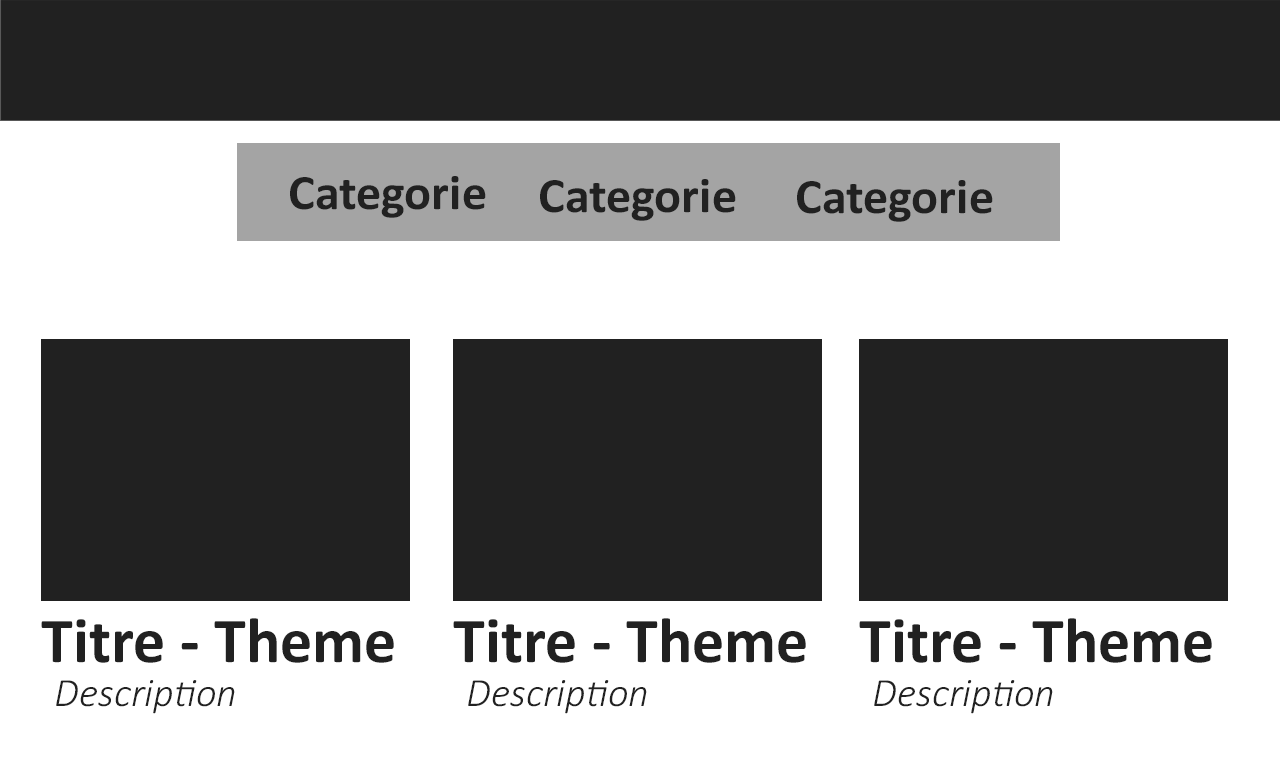
<style>
.page{position:relative;width:1280px;height:760px;background:#212121}
.page>*{position:absolute;margin:0}
.t1{font:49.8px "Calibri-Bold";color:#212121}
.t2{font:64.4px "Calibri-Bold";color:#212121}
.t3{font:40.6px "Calibri-LightItalic";color:#212121}
</style>
<div class="page">
<p class="t1" style="left:290px;top:176px;width:196px;height:42px">Categorie</p>
<p class="t1" style="left:540px;top:179px;width:196px;height:42px">Categorie</p>
<p class="t1" style="left:797px;top:180px;width:196px;height:42px">Categorie</p>
<p class="t2" style="left:41px;top:618px;width:353px;height:45px">Titre - Theme</p>
<p class="t2" style="left:453px;top:618px;width:353px;height:45px">Titre - Theme</p>
<p class="t2" style="left:859px;top:618px;width:353px;height:45px">Titre - Theme</p>
<p class="t3" style="left:56px;top:680px;width:179px;height:34px">Description</p>
<p class="t3" style="left:468px;top:680px;width:179px;height:34px">Description</p>
<p class="t3" style="left:874px;top:680px;width:179px;height:34px">Description</p>
</div>
